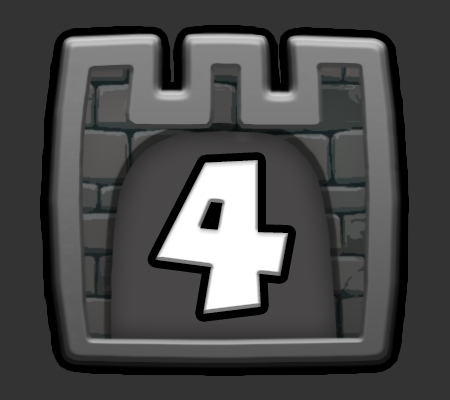
<style>
.page{position:relative;width:450px;height:400px;background:#333333}
.page>*{position:absolute;margin:0}
.t1{font:199.6px "Funhouse";color:#ffffff}
</style>
<div class="page">
<p class="t1" style="left:155px;top:160px;width:134px;height:154px">4</p>
</div>
